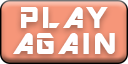
<style>
.page{position:relative;width:128px;height:64px;background:#ffffff}
.page>*{position:absolute;margin:0}
.t1{font:33.3px/26.4px "ARDESTINE";letter-spacing:0.1em;color:#ffffff}
</style>
<div class="page">
<p class="t1" style="left:13px;top:7px;width:102px;height:47px;text-align:center">PLAY<br>AGAIN</p>
</div>
